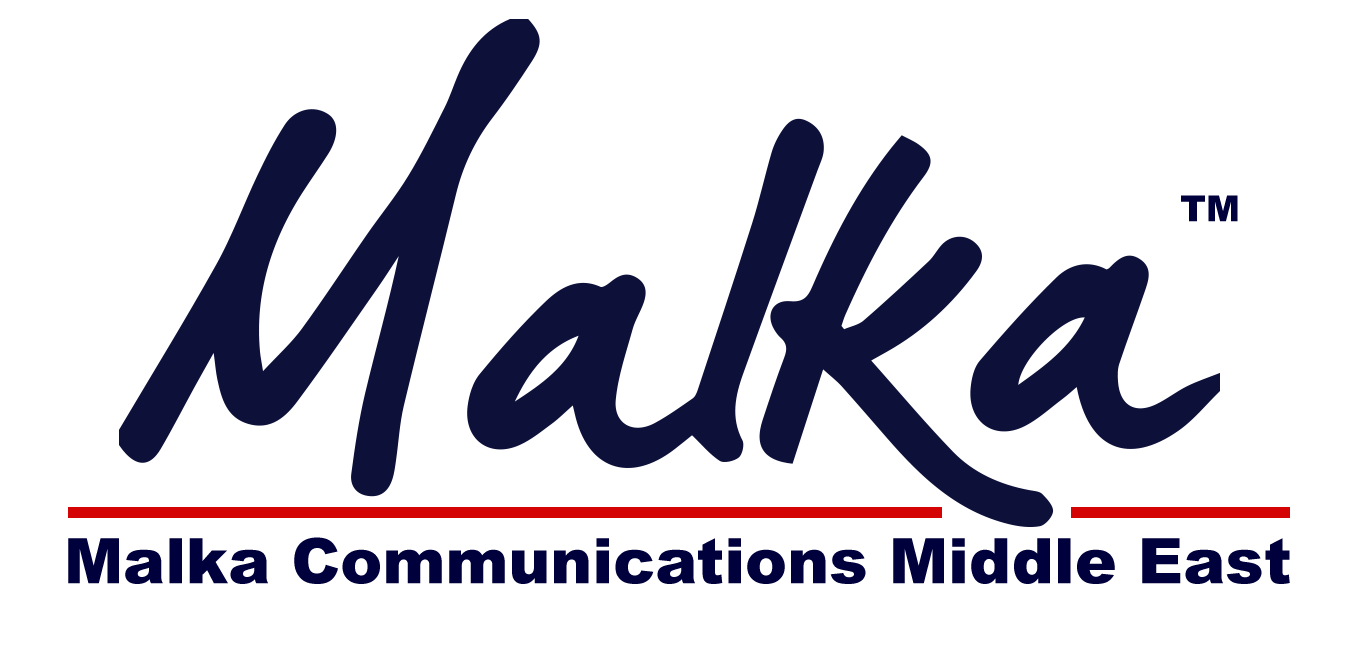
<style>
.page{position:relative;width:1352px;height:659px;background:#ffffff}
.page>*{position:absolute;margin:0}
.t1{font:36px "Arial-Black";color:#00003c}
.t2{font:63px "Arial-Black";color:#00003c}
</style>
<div class="page">
<p class="t1" style="left:1181px;top:195px;width:57px;height:27px">TM</p>
<p class="t2" style="left:68px;top:537px;width:1222px;height:47px">Malka Communications Middle East</p>
</div>
